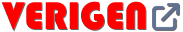
<style>
.page{position:relative;width:183px;height:32px;background:#ff0000}
.page>*{position:absolute;margin:0}
.t1{font:40px "Bauhaus93";color:#ff0000}
</style>
<div class="page">
<p class="t1" style="left:1px;top:1px;width:145px;height:30px">VERIGEN</p>
</div>
